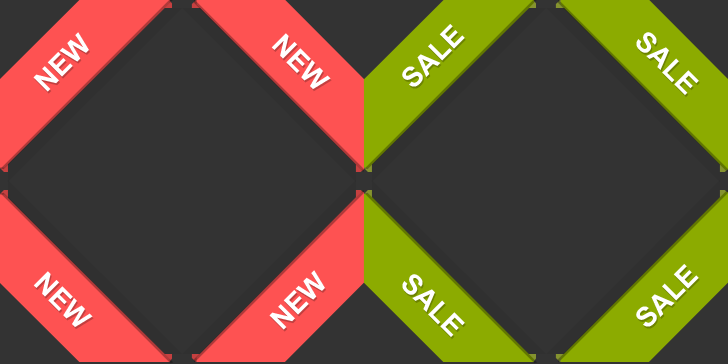
<style>
.page{position:relative;width:728px;height:364px;background:#333333}
.page>*{position:absolute;margin:0}
.t1{font:28px "Arial-BoldMT";color:#ffffff;text-transform:uppercase}
</style>
<div class="page">
<p class="t1" style="left:402px;top:24px;width:63px;height:63px;rotate:-45deg">sale</p>
<p class="t1" style="left:33px;top:32px;width:56px;height:60px;rotate:-45deg">new</p>
<p class="t1" style="left:271px;top:33px;width:60px;height:57px;rotate:45deg">new</p>
<p class="t1" style="left:636px;top:32px;width:63px;height:64px;rotate:45deg">sale</p>
<p class="t1" style="left:269px;top:270px;width:56px;height:60px;rotate:-45deg">new</p>
<p class="t1" style="left:636px;top:264px;width:63px;height:63px;rotate:-45deg">sale</p>
<p class="t1" style="left:33px;top:271px;width:60px;height:57px;rotate:45deg">new</p>
<p class="t1" style="left:402px;top:274px;width:63px;height:64px;rotate:45deg">sale</p>
</div>
